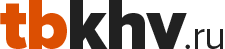
<style>
.page{position:relative;width:225px;height:49px;background:#ffffff}
.page>*{position:absolute;margin:0}
.t1{font:72px "ProximaNova-Black";letter-spacing:-0.025em;color:#212121}
.t2{font:72px "ProximaNova-Black";letter-spacing:-0.025em;color:#dc4f02}
.t3{font:40px "ProximaNova-Regular";letter-spacing:-0.025em;color:#212121}
</style>
<div class="page">
<p class="t1" style="left:0px;top:0px;width:223px;height:49px"><span class="t2">tb</span>khv<span class="t3">.ru</span></p>
</div>
